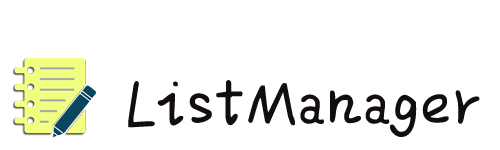
<style>
.page{position:relative;width:500px;height:150px;background:#ffffff}
.page>*{position:absolute;margin:0}
.t1{font:80px "FZMWJW--GB1-0";color:#120e0d}
</style>
<div class="page">
<p class="t1" style="left:128px;top:80px;width:352px;height:57px">ListManager</p>
</div>
